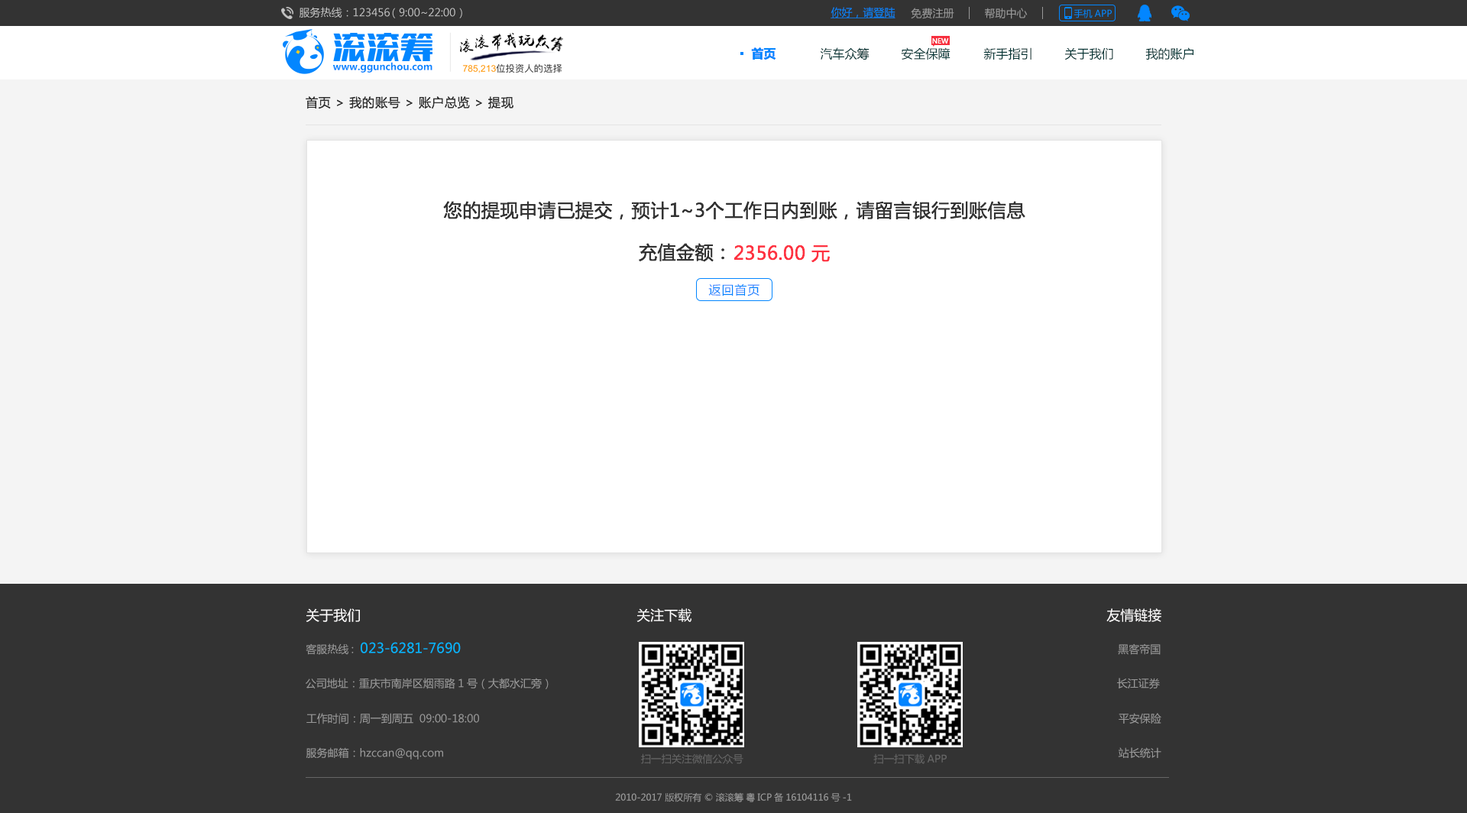
<style>
.page{position:relative;width:1467px;height:813px;background:#ffffff}
.page>*{position:absolute;margin:0}
.t1{font:10.7px "MicrosoftYaHei";color:#c4c4c4}
.t2{font:10.7px "MicrosoftYaHei";color:#0386ff;text-decoration:underline}
.t3{font:10.7px "MicrosoftYaHei";color:#999999}
.t4{font:9.2px "MicrosoftYaHei";color:#0386ff}
.t5{font:6.9px "MicrosoftYaHei";color:#ffffff}
.t6{font:12.2px "MicrosoftYaHei-Bold";color:#0386ff}
.t7{font:12.2px "MicrosoftYaHei";color:#033333}
.t8{font:9.6px "MicrosoftYaHei-Bold";color:#0386ff}
.t9{font:12.2px "MicrosoftYaHei";letter-spacing:0.05em;color:#333333}
.t10{font:18.3px "MicrosoftYaHei";letter-spacing:0.025em;color:#333333}
.t11{font:18.3px "MicrosoftYaHei";letter-spacing:0.025em;color:#fe3342}
.t12{font:12.2px "MicrosoftYaHei";letter-spacing:0.05em;color:#0386ff}
.t13{font:13.8px "MicrosoftYaHei";color:#fffefe}
.t14{font:13.8px "MicrosoftYaHei";color:#03b6ff}
.t15{font:10.2px "MicrosoftYaHei";color:#666666}
.t16{font:9.2px "MicrosoftYaHei";color:#999999}
</style>
<div class="page">
<p class="t1" style="left:299px;top:7px;width:163px;height:11px">服务热线：123456 （9:00~22:00）</p>
<p class="t2" style="left:830px;top:7px;width:65px;height:11px">你好，请登陆</p>
<p class="t3" style="left:911px;top:8px;width:43px;height:11px">免费注册</p>
<p class="t3" style="left:985px;top:8px;width:43px;height:11px">帮助中心</p>
<p class="t4" style="left:1073px;top:9px;width:39px;height:9px">手机APP</p>
<p class="t5" style="left:932px;top:37px;width:17px;height:7px">NEW</p>
<p class="t6" style="left:751px;top:47px;width:25px;height:13px">首页</p>
<p class="t7" style="left:820px;top:47px;width:49px;height:13px">汽车众筹</p>
<p class="t7" style="left:901px;top:47px;width:49px;height:13px">安全保障</p>
<p class="t7" style="left:983px;top:47px;width:48px;height:13px">新手指引</p>
<p class="t7" style="left:1064px;top:47px;width:49px;height:13px">关于我们</p>
<p class="t7" style="left:1145px;top:47px;width:48px;height:13px">我的账户</p>
<p class="t8" style="left:333px;top:62px;width:99px;height:11px">www.ggunchou.com</p>
<p class="t9" style="left:306px;top:96px;width:207px;height:13px">首页 &gt; 我的账号 &gt; 账户总览 &gt; 提现</p>
<p class="t10" style="left:443px;top:201px;width:582px;height:19px">您的提现申请已提交，预计1~3个工作日内到账，请留言银行到账信息</p>
<p class="t10" style="left:639px;top:243px;width:85px;height:19px">充值金额：</p>
<p class="t11" style="left:733px;top:244px;width:97px;height:19px">2356.00 元</p>
<p class="t12" style="left:708px;top:283px;width:51px;height:13px">返回首页</p>
<p class="t13" style="left:306px;top:608px;width:54px;height:14px">关于我们</p>
<p class="t13" style="left:636px;top:608px;width:55px;height:14px">关注下载</p>
<p class="t13" style="left:1106px;top:608px;width:55px;height:14px">友情链接</p>
<p class="t14" style="left:306px;top:642px;width:155px;height:13px"><span class="t3">客服热线:  </span>023-6281-7690</p>
<p class="t3" style="left:1118px;top:643px;width:43px;height:12px">黑客帝国</p>
<p class="t3" style="left:306px;top:678px;width:243px;height:11px">公司地址：重庆市南岸区烟雨路1号（大都水汇旁）</p>
<p class="t3" style="left:1117px;top:678px;width:43px;height:11px">长江证券</p>
<p class="t3" style="left:306px;top:713px;width:173px;height:11px">工作时间：周一到周五  09:00-18:00</p>
<p class="t3" style="left:1119px;top:713px;width:42px;height:11px">平安保险</p>
<p class="t3" style="left:306px;top:747px;width:137px;height:12px">服务邮箱：hzccan@qq.com</p>
<p class="t3" style="left:1118px;top:747px;width:43px;height:11px">站长统计</p>
<p class="t15" style="left:641px;top:753px;width:102px;height:11px">扫一扫关注微信公众号</p>
<p class="t15" style="left:873px;top:753px;width:74px;height:11px">扫一扫下载APP</p>
<p class="t16" style="left:615px;top:792px;width:237px;height:10px">2010-2017 版权所有 © 滚滚筹 粤ICP备16104116号-1</p>
</div>
